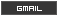
<style>
.page{position:relative;width:58px;height:16px;background:#373636}
.page>*{position:absolute;margin:0}
.t1{font:8px "BitDustTwo";color:#ffffff;text-transform:uppercase}
</style>
<div class="page">
<p class="t1" style="left:17px;top:6px;width:25px;height:5px">GMAIL</p>
</div>
